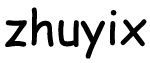
<style>
.page{position:relative;width:150px;height:63px;background:#ffffff}
.page>*{position:absolute;margin:0}
.t1{font:48px "ComicSansMS";color:#000000}
</style>
<div class="page">
<p class="t1" style="left:5px;top:7px;width:142px;height:52px">zhuyix</p>
</div>
